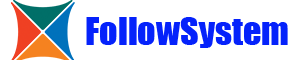
<style>
.page{position:relative;width:300px;height:60px;background:#ffffff}
.page>*{position:absolute;margin:0}
.t1{font:36px "Impact";color:#0522fb}
</style>
<div class="page">
<p class="t1" style="left:86px;top:17px;width:202px;height:31px">FollowSystem</p>
</div>
